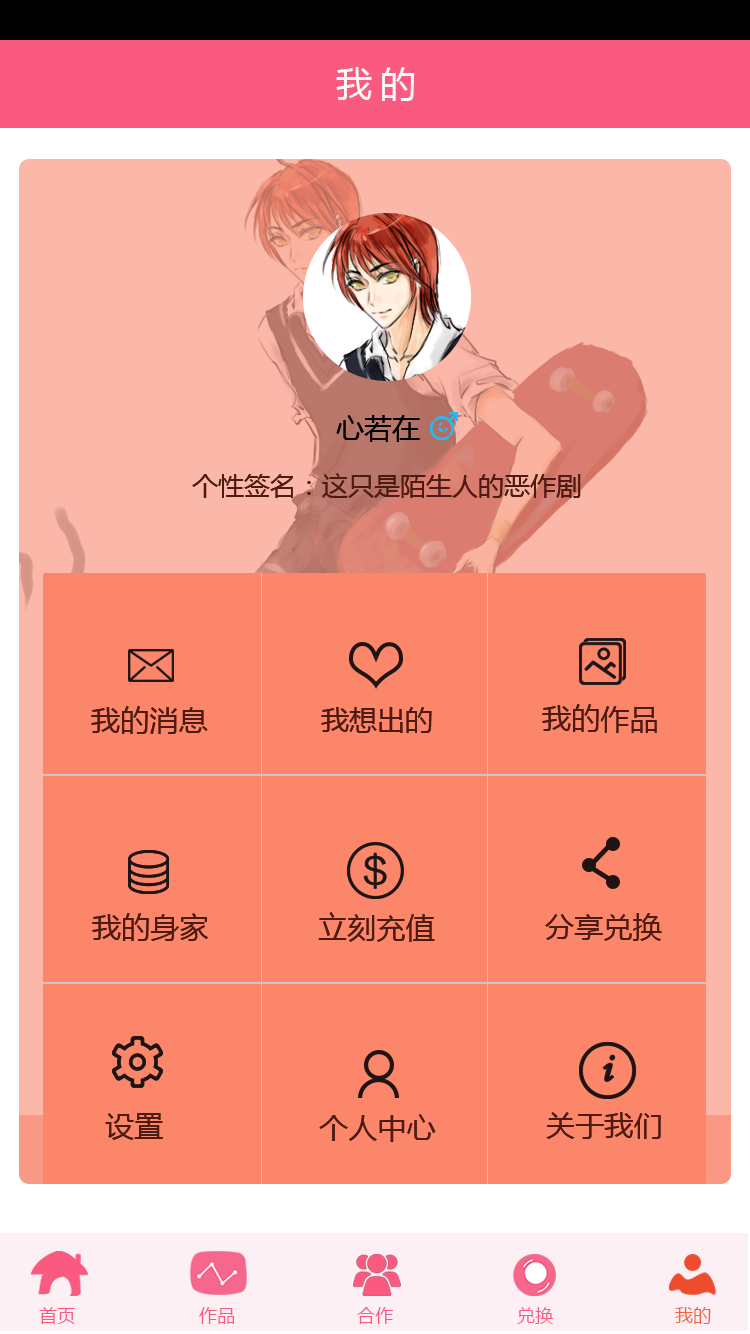
<style>
.page{position:relative;width:750px;height:1334px;background:#fc866a}
.page>*{position:absolute;margin:0}
.t1{font:36px "MicrosoftYaHei";letter-spacing:0.22em;color:#fcfbfb}
.t2{font:28px "MicrosoftYaHei";color:#000000}
.t3{font:26px "MicrosoftYaHei";color:#4d1b12}
.t4{font:29.2px "MicrosoftYaHei";color:#4d1b12}
.t5{font:28px "MicrosoftYaHei";color:#4d1b12}
.t6{font:18px "MicrosoftYaHei";letter-spacing:0.02em;color:#fa5a80}
.t7{font:18px "MicrosoftYaHei";letter-spacing:0.02em;color:#f56440}
</style>
<div class="page">
<p class="t1" style="left:336px;top:67px;width:79px;height:34px">我的</p>
<p class="t2" style="left:336px;top:415px;width:84px;height:27px">心若在</p>
<p class="t3" style="left:192px;top:473px;width:389px;height:25px">个性签名：这只是陌生人的恶作剧</p>
<p class="t4" style="left:91px;top:706px;width:117px;height:28px">我的消息</p>
<p class="t5" style="left:321px;top:707px;width:111px;height:26px">我想出的</p>
<p class="t4" style="left:542px;top:704px;width:115px;height:29px">我的作品</p>
<p class="t4" style="left:92px;top:913px;width:117px;height:28px">我的身家</p>
<p class="t4" style="left:318px;top:912px;width:117px;height:30px">立刻充值</p>
<p class="t4" style="left:545px;top:913px;width:117px;height:28px">分享兑换</p>
<p class="t4" style="left:105px;top:1113px;width:58px;height:27px">设置</p>
<p class="t4" style="left:319px;top:1114px;width:117px;height:28px">个人中心</p>
<p class="t4" style="left:546px;top:1112px;width:115px;height:27px">关于我们</p>
<p class="t6" style="left:39px;top:1307px;width:36px;height:17px">首页</p>
<p class="t6" style="left:199px;top:1307px;width:36px;height:17px">作品</p>
<p class="t6" style="left:357px;top:1307px;width:37px;height:17px">合作</p>
<p class="t6" style="left:517px;top:1307px;width:37px;height:17px">兑换</p>
<p class="t7" style="left:675px;top:1307px;width:36px;height:17px">我的</p>
</div>
